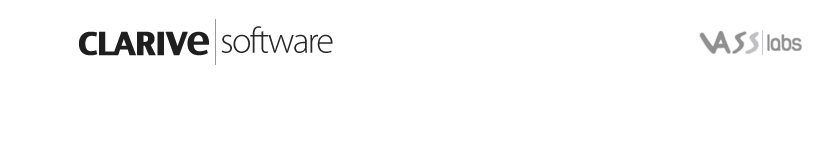
<style>
.page{position:relative;width:833px;height:148px;background:#ffffff}
.page>*{position:absolute;margin:0}
.t1{font:36.9px "MyriadPro-Light";letter-spacing:-0.05em;color:#1f1f1f}
.t2{font:30px "CharcoalCY";letter-spacing:-0.055em;color:#1f1f1f;font-weight:bold;scale:1.11 1}
.t3{font:39.3px "CharcoalCY";letter-spacing:-0.055em;color:#1f1f1f;scale:1.03 1}
</style>
<div class="page">
<p class="t1" style="left:221px;top:26px;width:112px;height:27px;opacity:0.97">software</p>
<p class="t2" style="left:79px;top:31px;width:130px;height:25px">CLARIV<span class="t3">e</span></p>
</div>
